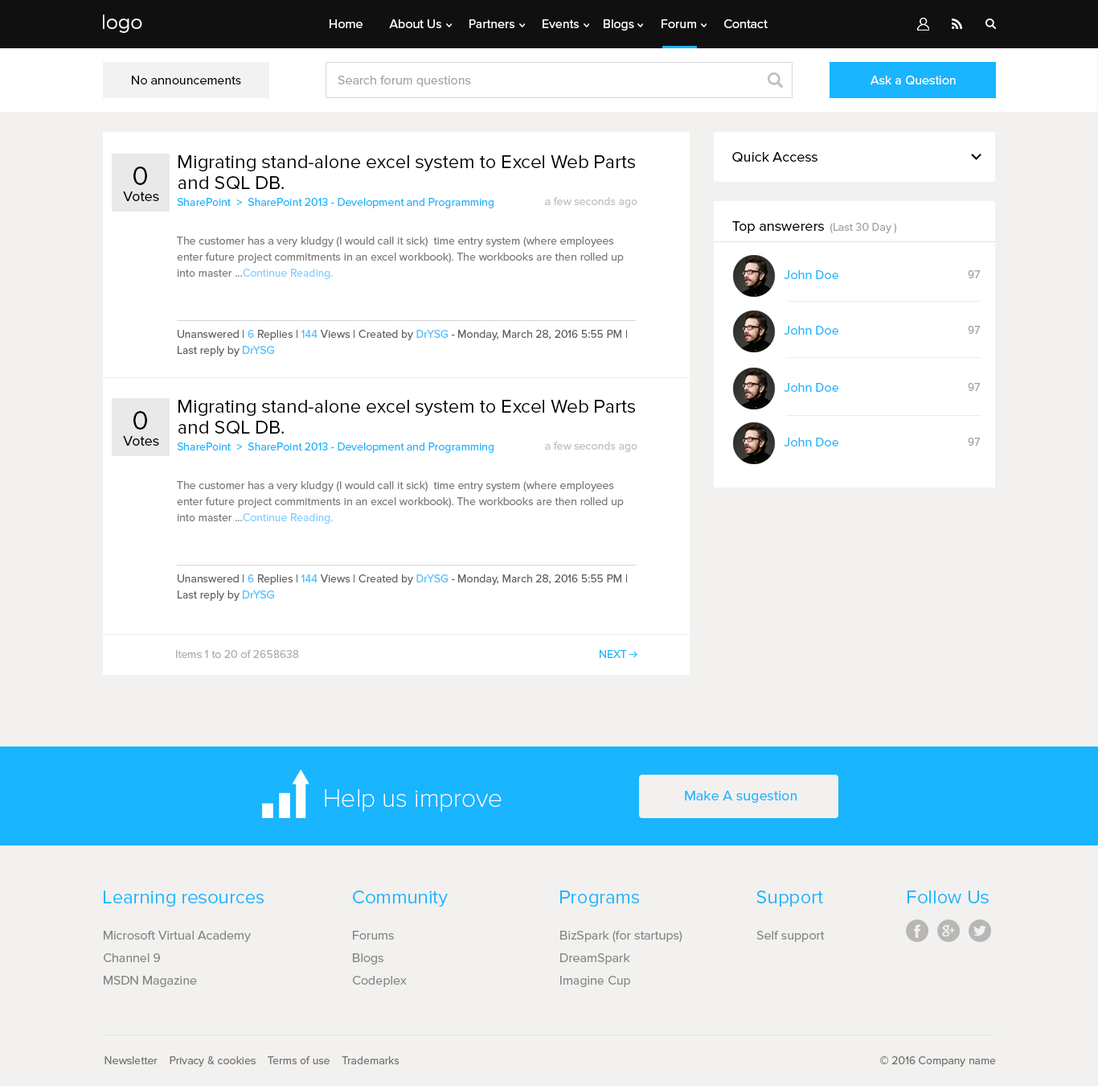
<style>
.page{position:relative;width:1098px;height:1086px;background:#f2f1ef}
.page>*{position:absolute;margin:0}
.t1{font:19.3px "Montserrat-Light";color:#ffffff}
.t2{font:12.9px "ProximaNova-Regular";color:#ffffff}
.t3{font:12.9px "ProximaNova-Regular";color:#000000}
.t4{font:12.9px "ProximaNova-Regular";color:#a3a3a3}
.t5{font:19.3px/20.9px "ProximaNova-Regular";color:#000000}
.t6{font:14.5px "ProximaNova-Regular";color:#000000}
.t7{font:27.3px "ProximaNova-Regular";color:#000000}
.t8{font:11.3px "ProximaNova-Regular";color:#19b5fe}
.t9{font:11.3px "ProximaNova-Regular";color:#bebfc0}
.t10{font:11.3px "ProximaNova-Regular";color:#a3a3a3}
.t11{font:11.3px/16.1px "ProximaNova-Regular";color:#7c7c7c}
.t12{font:12.9px "ProximaNova-Regular";color:#19b5fe}
.t13{font:11.3px/16.1px "ProximaNova-Regular";color:#5f6165}
.t14{font:11.3px "ProximaNova-Regular";color:#aeafb0}
.t15{font:25.7px "ProximaNovaT-Thin";color:#ffffff}
.t16{font:14.5px "ProximaNova-Regular";color:#19b5fe}
.t17{font:19.3px "ProximaNova-Regular";color:#19b5fe}
.t18{font:12.9px/22.5px "ProximaNova-Regular";color:#858583}
.t19{font:12.9px "ProximaNova-Regular";color:#858583}
.t20{font:11.3px "ProximaNova-Regular";color:#757473}
</style>
<div class="page">
<p class="t1" style="left:103px;top:14px;width:39px;height:19px">logo</p>
<p class="t2" style="left:330px;top:19px;width:438px;height:12px">Home        About Us        Partners        Events       Blogs        Forum        Contact</p>
<p class="t3" style="left:132px;top:76px;width:109px;height:8px">No announcements</p>
<p class="t4" style="left:338px;top:76px;width:133px;height:11px">Search forum questions</p>
<p class="t2" style="left:871px;top:76px;width:85px;height:9px">Ask a Question</p>
<p class="t5" style="left:179px;top:155px;width:456px;height:35px">Migrating stand-alone excel system to Excel Web Parts<br>and SQL DB.</p>
<p class="t6" style="left:733px;top:152px;width:85px;height:10px">Quick Access</p>
<p class="t7" style="left:133px;top:166px;width:14px;height:19px">0</p>
<p class="t6" style="left:123px;top:191px;width:36px;height:10px">Votes</p>
<p class="t8" style="left:177px;top:198px;width:317px;height:10px">SharePoint  &gt;  SharePoint 2013 - Development and Programming</p>
<p class="t9" style="left:545px;top:197px;width:93px;height:10px">a few seconds ago</p>
<p class="t6" style="left:733px;top:221px;width:91px;height:12px">Top answerers</p>
<p class="t10" style="left:831px;top:223px;width:66px;height:10px">(Last 30 Day )</p>
<p class="t11" style="left:177px;top:236px;width:447px;height:43px">The customer has a very kludgy (I would call it sick)  time entry system (where employees enter future project commitments in an excel workbook). The workbooks are then rolled up into master ...Continue Reading.</p>
<p class="t12" style="left:784px;top:270px;width:55px;height:9px">John Doe</p>
<p class="t10" style="left:968px;top:270px;width:12px;height:8px">97</p>
<p class="t13" style="left:178px;top:330px;width:449px;height:26px">Unanswered | 6 Replies | 144 Views | Created by DrYSG - Monday, March 28, 2016 5:55 PM | Last reply by DrYSG</p>
<p class="t12" style="left:784px;top:326px;width:55px;height:9px">John Doe</p>
<p class="t10" style="left:968px;top:326px;width:12px;height:8px">97</p>
<p class="t12" style="left:784px;top:383px;width:55px;height:9px">John Doe</p>
<p class="t10" style="left:968px;top:383px;width:12px;height:8px">97</p>
<p class="t5" style="left:179px;top:400px;width:456px;height:34px">Migrating stand-alone excel system to Excel Web Parts<br>and SQL DB.</p>
<p class="t7" style="left:133px;top:411px;width:14px;height:18px">0</p>
<p class="t6" style="left:123px;top:436px;width:36px;height:9px">Votes</p>
<p class="t12" style="left:784px;top:437px;width:55px;height:9px">John Doe</p>
<p class="t10" style="left:968px;top:437px;width:12px;height:8px">97</p>
<p class="t8" style="left:177px;top:442px;width:317px;height:11px">SharePoint  &gt;  SharePoint 2013 - Development and Programming</p>
<p class="t9" style="left:545px;top:441px;width:93px;height:11px">a few seconds ago</p>
<p class="t11" style="left:177px;top:481px;width:447px;height:42px">The customer has a very kludgy (I would call it sick)  time entry system (where employees enter future project commitments in an excel workbook). The workbooks are then rolled up into master ...Continue Reading.</p>
<p class="t13" style="left:178px;top:574px;width:449px;height:27px">Unanswered | 6 Replies | 144 Views | Created by DrYSG - Monday, March 28, 2016 5:55 PM | Last reply by DrYSG</p>
<p class="t14" style="left:176px;top:650px;width:123px;height:8px">Items 1 to 20 of 2658638</p>
<p class="t8" style="left:600px;top:650px;width:27px;height:8px">NEXT</p>
<p class="t15" style="left:325px;top:789px;width:177px;height:22px">Help us improve</p>
<p class="t16" style="left:685px;top:790px;width:112px;height:13px">Make A sugestion</p>
<p class="t17" style="left:104px;top:890px;width:160px;height:16px">Learning resources</p>
<p class="t17" style="left:353px;top:890px;width:95px;height:16px">Community</p>
<p class="t17" style="left:560px;top:890px;width:79px;height:16px">Programs</p>
<p class="t17" style="left:757px;top:890px;width:66px;height:16px">Support</p>
<p class="t17" style="left:908px;top:890px;width:81px;height:13px">Follow Us</p>
<p class="t18" style="left:104px;top:930px;width:147px;height:57px">Microsoft Virtual Academy<br>Channel 9<br>MSDN Magazine</p>
<p class="t18" style="left:353px;top:930px;width:54px;height:57px">Forums<br>Blogs<br>Codeplex</p>
<p class="t18" style="left:560px;top:930px;width:123px;height:57px">BizSpark (for startups)<br>DreamSpark<br>Imagine Cup</p>
<p class="t19" style="left:757px;top:930px;width:68px;height:12px">Self support</p>
<p class="t20" style="left:105px;top:1056px;width:295px;height:10px">Newsletter    Privacy &amp; cookies    Terms of use    Trademarks</p>
<p class="t20" style="left:881px;top:1056px;width:115px;height:10px">© 2016 Company name</p>
</div>
